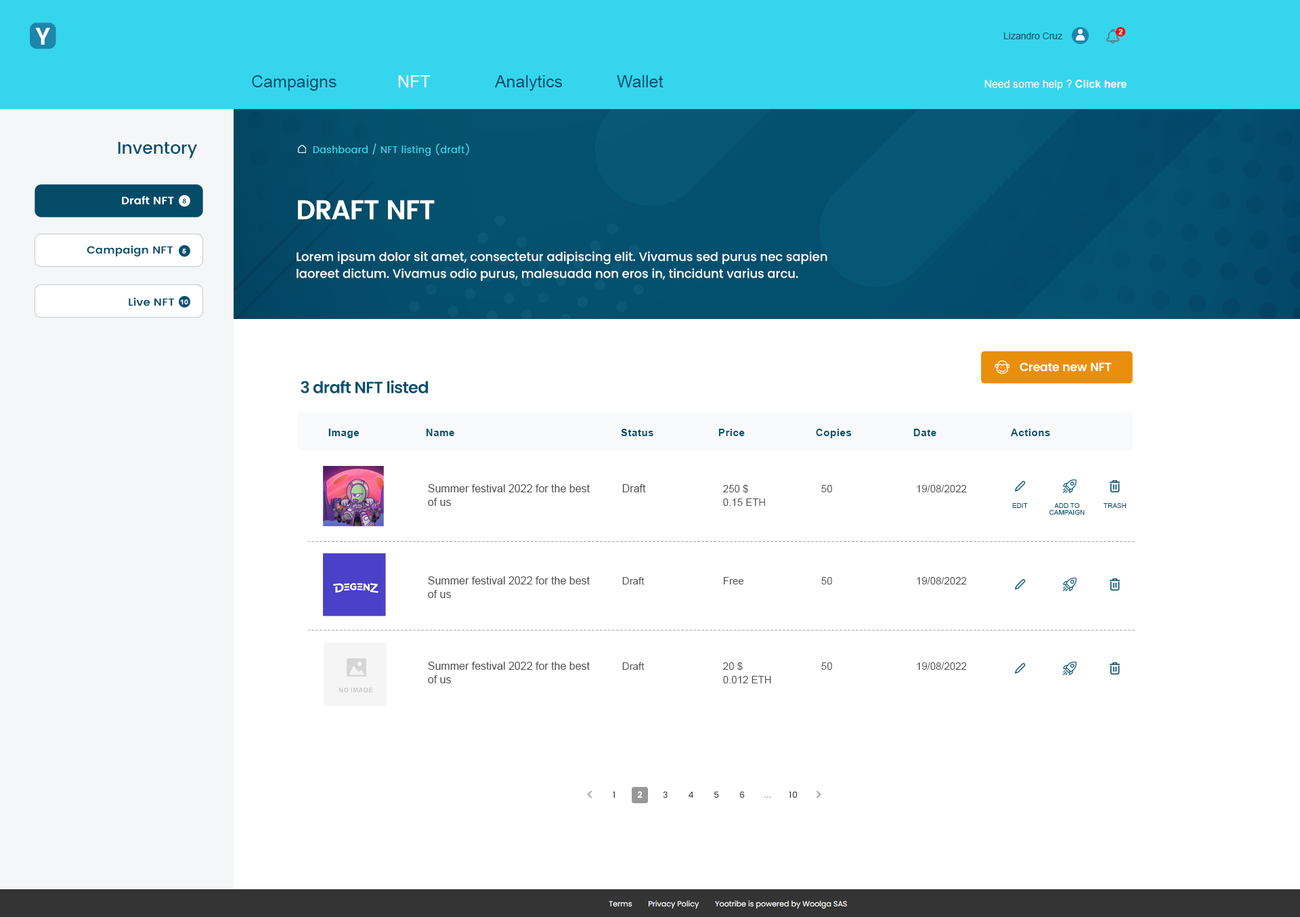
<style>
.page{position:relative;width:1300px;height:917px;background:#ffffff}
.page>*{position:absolute;margin:0}
.t1{font:23.7px "Poppins-SemiBold";color:#ffffff}
.t2{font:7.4px "Arial-BoldMT";color:#ffffff}
.t3{font:9.5px "ArialMT";color:#105761}
.t4{font:16.9px "ArialMT";color:#044d6e}
.t5{font:16.9px "ArialMT";color:#04506e}
.t6{font:16.9px "ArialMT";color:#ffffff}
.t7{font:10.8px "ArialMT";color:#ffffff}
.t8{font:10.8px "Arial-BoldMT";color:#ffffff}
.t9{font:16.9px "Poppins-Medium";color:#05506d}
.t10{font:9.5px "Poppins-Regular";letter-spacing:0.04em;color:#38d8ec}
.t11{font:10.5px "Poppins-SemiBold";color:#ffffff;scale:1.07 1}
.t12{font:6.8px "Arial-BoldMT";color:#044b67;scale:1.07 1}
.t13{font:6.8px "Poppins-SemiBold";color:#044b67;scale:1.07 1}
.t14{font:27.1px "Poppins-SemiBold";letter-spacing:-0.03em;color:#ffffff}
.t15{font:10.5px "Poppins-SemiBold";color:#044f6e;scale:1.07 1}
.t16{font:6.8px "Arial-BoldMT";color:#f8f9fb;scale:1.07 1}
.t17{font:12.2px/16.9px "Poppins-Medium";color:#ffffff}
.t18{font:11.9px "Poppins-SemiBold";letter-spacing:-0.03em;color:#ffffff}
.t19{font:16.3px "Poppins-SemiBold";letter-spacing:-0.03em;color:#05516d}
.t20{font:10.2px "Arial-BoldMT";letter-spacing:0.04em;color:#05506d}
.t21{font:10.8px/13.5px "ArialMT";color:#4e4e4e}
.t22{font:10.8px "ArialMT";color:#4e4e4e}
.t23{font:10.2px/13.5px "ArialMT";color:#4e4e4e}
.t24{font:10.2px "ArialMT";color:#4e4e4e}
.t25{font:6.8px "ArialMT";color:#044e6b}
.t26{font:6.8px/6.8px "ArialMT";color:#044e6b}
.t27{font:6.4px "Arial-BoldMT";letter-spacing:0.04em;color:#c5c5c5}
</style>
<div class="page">
<p class="t1" style="left:35px;top:28px;width:15px;height:17px">Y</p>
<p class="t2" style="left:1119px;top:29px;width:4px;height:6px">2</p>
<p class="t3" style="left:1004px;top:33px;width:59px;height:6px">Lizandro Cruz</p>
<p class="t4" style="left:252px;top:75px;width:412px;height:16px"><span class="t5">Campaigns   </span><span class="t6">NFT</span>   Analytics   Wallet</p>
<p class="t7" style="left:985px;top:79px;width:142px;height:11px">Need some help ? <span class="t8">Click here</span></p>
<p class="t9" style="left:118px;top:142px;width:79px;height:16px">Inventory</p>
<p class="t10" style="left:313px;top:144px;width:156px;height:12px">Dashboard / NFT listing (draft)</p>
<p class="t11" style="left:122px;top:196px;width:52px;height:9px">Draft NFT</p>
<p class="t12" style="left:182px;top:198px;width:4px;height:6px"><span class="t13"> </span>8</p>
<p class="t14" style="left:298px;top:200px;width:137px;height:19px">DRAFT NFT</p>
<p class="t15" style="left:87px;top:245px;width:86px;height:12px">Campaign NFT</p>
<p class="t16" style="left:182px;top:249px;width:4px;height:5px">5</p>
<p class="t17" style="left:297px;top:251px;width:531px;height:30px">Lorem ipsum dolor sit amet, consectetur adipiscing elit. Vivamus sed purus nec sapien laoreet dictum. Vivamus odio purus, malesuada non eros in, tincidunt varius arcu.</p>
<p class="t15" style="left:129px;top:297px;width:46px;height:9px">Live NFT</p>
<p class="t16" style="left:180px;top:299px;width:8px;height:6px">10</p>
<p class="t18" style="left:1020px;top:362px;width:92px;height:10px">Create new NFT</p>
<p class="t19" style="left:301px;top:380px;width:127px;height:13px">3 draft NFT listed</p>
<p class="t20" style="left:328px;top:429px;width:722px;height:9px">Image   Name       Status   Price   Copies   Date    Actions</p>
<p class="t21" style="left:428px;top:484px;width:162px;height:22px">Summer festival 2022 for the best<br>of us</p>
<p class="t22" style="left:622px;top:484px;width:24px;height:8px">Draft</p>
<p class="t23" style="left:723px;top:484px;width:42px;height:22px">250 $<br>0.15 ETH</p>
<p class="t24" style="left:822px;top:485px;width:10px;height:7px">50</p>
<p class="t24" style="left:917px;top:485px;width:50px;height:7px">19/08/2022</p>
<p class="t25" style="left:1013px;top:503px;width:15px;height:5px">EDIT</p>
<p class="t26" style="left:1049px;top:503px;width:36px;height:12px;text-align:center">ADD TO<br>CAMPAIGN</p>
<p class="t25" style="left:1103px;top:503px;width:23px;height:5px">TRASH</p>
<p class="t21" style="left:428px;top:576px;width:162px;height:22px">Summer festival 2022 for the best<br>of us</p>
<p class="t24" style="left:622px;top:577px;width:23px;height:7px">Draft</p>
<p class="t24" style="left:723px;top:577px;width:21px;height:7px">Free</p>
<p class="t24" style="left:822px;top:577px;width:10px;height:7px">50</p>
<p class="t24" style="left:917px;top:577px;width:50px;height:7px">19/08/2022</p>
<p class="t21" style="left:428px;top:662px;width:162px;height:21px">Summer festival 2022 for the best<br>of us</p>
<p class="t24" style="left:622px;top:662px;width:23px;height:8px">Draft</p>
<p class="t23" style="left:723px;top:662px;width:48px;height:21px">20 $<br>0.012 ETH</p>
<p class="t24" style="left:822px;top:662px;width:10px;height:8px">50</p>
<p class="t24" style="left:917px;top:662px;width:50px;height:8px">19/08/2022</p>
<p class="t27" style="left:339px;top:687px;width:34px;height:6px">NO IMAGE</p>
</div>
